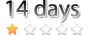
<style>
.page{position:relative;width:91px;height:36px;background:#ffffff}
.page>*{position:absolute;margin:0}
.t1{font:24px "MyriadPro-Regular"}
</style>
<div class="page">
<p class="t1" style="left:6px;top:0px;width:73px;height:22px">14 days</p>
</div>
